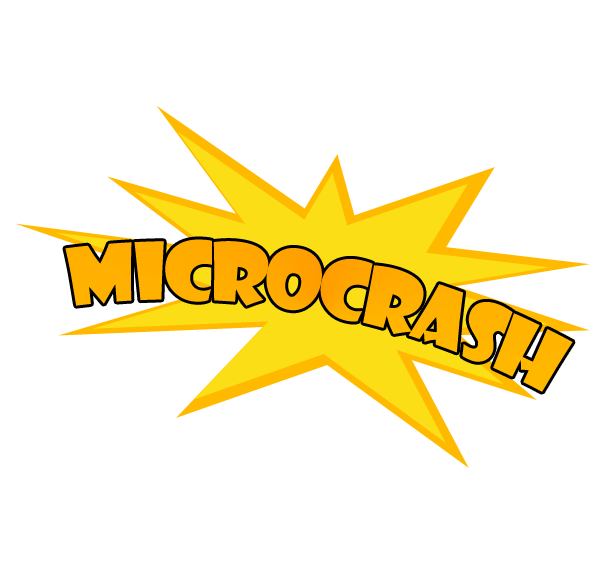
<style>
.page{position:relative;width:600px;height:561px;background:#ffffff}
.page>*{position:absolute;margin:0}
.t1{font:77px "ShowcardGothic-Reg";letter-spacing:-0.025em;color:#ffc600}
</style>
<div class="page">
<p class="t1" style="left:65px;top:239px;width:508px;height:153px;rotate:10deg">MicroCrash</p>
</div>
